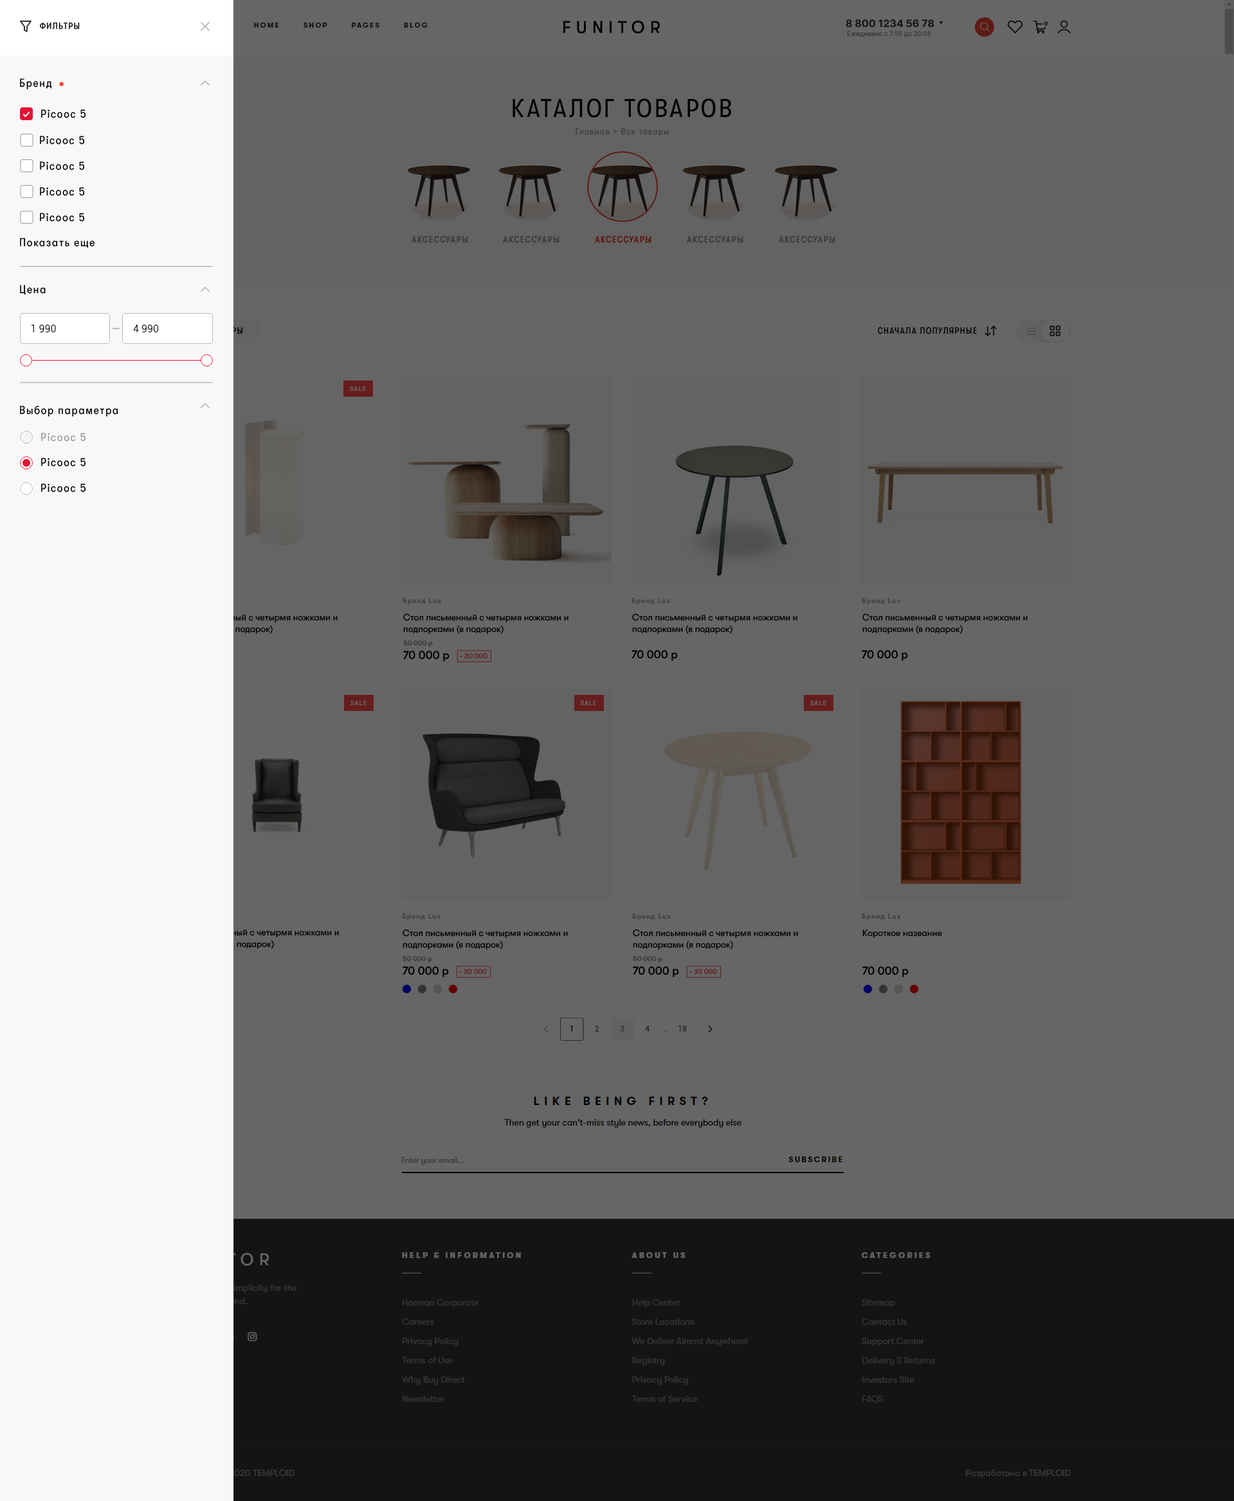
<style>
.page{position:relative;width:1234px;height:1501px;background:#666666}
.page>*{position:absolute;margin:0}
.t1{font:9px "GTWalsheimPro-CondensedRegular";letter-spacing:0.1em;color:#000000}
.t2{font:11.6px "GTWalsheimPro-CondensedRegular";letter-spacing:0.1em;color:#000000}
.t3{font:25.7px "GTWalsheimPro-CondensedRegular";letter-spacing:0.1em;color:#000000;text-transform:uppercase}
.t4{font:9px "GTWalsheimPro-CondensedRegular";letter-spacing:0.1em;color:#3c3c3c}
.t5{font:9px "GTWalsheimPro-CondensedRegular";letter-spacing:0.1em;color:#3c3c3c;text-transform:uppercase;font-weight:bold}
.t6{font:9px "GTWalsheimPro-CondensedRegular";letter-spacing:0.1em;color:#5e1b15;text-transform:uppercase;font-weight:bold}
.t7{font:9px "GTWalsheimPro-CondensedRegular";letter-spacing:0.1em;color:#000000;text-transform:uppercase}
.t8{font:11.6px "GTWalsheimPro-CondensedRegular";letter-spacing:0.1em;color:#979797}
.t9{font:7.1px "GTWalsheimPro-Medium";letter-spacing:0.1em;color:#3c3c3c}
.t10{font:9px/11.6px "GTWalsheimPro-Regular";color:#000000}
.t11{font:7.1px "GTWalsheimPro-Medium";color:#3c3c3c}
.t12{font:11.6px "GTWalsheimPro-Medium";color:#000000}
.t13{font:7.1px "GTWalsheimPro-Medium";color:#661d1d}
.t14{font:9px "GTWalsheimPro-Regular";color:#000000}
.t15{font:9px "GTWalsheimPro-Regular";color:#3c3c3c}
</style>
<div class="page">
<p class="t1" style="left:40px;top:22px;width:40px;height:8px">ФИЛЬТРЫ</p>
<p class="t2" style="left:20px;top:78px;width:32px;height:11px">Бренд</p>
<p class="t3" style="left:512px;top:98px;width:219px;height:20px">КАТАЛОГ ТОВАРОВ</p>
<p class="t2" style="left:41px;top:109px;width:45px;height:9px">Picooc 5</p>
<p class="t2" style="left:40px;top:136px;width:45px;height:9px">Picooc 5</p>
<p class="t4" style="left:575px;top:128px;width:94px;height:9px">Главная &gt; Все товары</p>
<p class="t2" style="left:40px;top:161px;width:45px;height:9px">Picooc 5</p>
<p class="t2" style="left:40px;top:187px;width:45px;height:9px">Picooc 5</p>
<p class="t2" style="left:40px;top:213px;width:45px;height:9px">Picooc 5</p>
<p class="t2" style="left:20px;top:238px;width:74px;height:10px">Показать еще</p>
<p class="t5" style="left:411px;top:235px;width:57px;height:8px">аксессуары</p>
<p class="t5" style="left:503px;top:235px;width:56px;height:8px">аксессуары</p>
<p class="t6" style="left:595px;top:235px;width:56px;height:8px">аксессуары</p>
<p class="t5" style="left:687px;top:235px;width:56px;height:8px">аксессуары</p>
<p class="t5" style="left:779px;top:235px;width:56px;height:8px">аксессуары</p>
<p class="t2" style="left:20px;top:285px;width:26px;height:10px">Цена</p>
<p class="t7" style="left:878px;top:327px;width:99px;height:7px">Сначала популярные</p>
<p class="t2" style="left:20px;top:406px;width:98px;height:11px">Выбор параметра</p>
<p class="t8" style="left:41px;top:433px;width:45px;height:9px">Picooc 5</p>
<p class="t2" style="left:41px;top:458px;width:45px;height:9px">Picooc 5</p>
<p class="t2" style="left:41px;top:483px;width:45px;height:9px">Picooc 5</p>
<p class="t9" style="left:402px;top:598px;width:39px;height:7px">Бренд Lux</p>
<p class="t9" style="left:631px;top:598px;width:39px;height:7px">Бренд Lux</p>
<p class="t9" style="left:861px;top:598px;width:39px;height:7px">Бренд Lux</p>
<p class="t10" style="left:403px;top:613px;width:165px;height:21px">Стол письменный с четырмя ножками и подпорками (в подарок)</p>
<p class="t10" style="left:632px;top:613px;width:165px;height:21px">Стол письменный с четырмя ножками и подпорками (в подарок)</p>
<p class="t10" style="left:862px;top:613px;width:165px;height:21px">Стол письменный с четырмя ножками и подпорками (в подарок)</p>
<p class="t11" style="left:403px;top:640px;width:30px;height:7px">50 000 р</p>
<p class="t12" style="left:403px;top:651px;width:46px;height:11px">70 000 р</p>
<p class="t13" style="left:460px;top:653px;width:27px;height:6px">- 30 000</p>
<p class="t12" style="left:631px;top:650px;width:47px;height:11px">70 000 р</p>
<p class="t12" style="left:861px;top:650px;width:47px;height:11px">70 000 р</p>
<p class="t9" style="left:402px;top:914px;width:38px;height:7px">Бренд Lux</p>
<p class="t9" style="left:632px;top:914px;width:38px;height:7px">Бренд Lux</p>
<p class="t9" style="left:861px;top:914px;width:39px;height:7px">Бренд Lux</p>
<p class="t10" style="left:402px;top:929px;width:166px;height:21px">Стол письменный с четырмя ножками и подпорками (в подарок)</p>
<p class="t10" style="left:633px;top:929px;width:165px;height:21px">Стол письменный с четырмя ножками и подпорками (в подарок)</p>
<p class="t14" style="left:862px;top:930px;width:80px;height:9px">Короткое название</p>
<p class="t11" style="left:402px;top:956px;width:30px;height:7px">50 000 р</p>
<p class="t11" style="left:633px;top:956px;width:29px;height:7px">50 000 р</p>
<p class="t12" style="left:402px;top:966px;width:47px;height:11px">70 000 р</p>
<p class="t13" style="left:459px;top:969px;width:28px;height:6px">- 30 000</p>
<p class="t12" style="left:633px;top:966px;width:46px;height:11px">70 000 р</p>
<p class="t13" style="left:689px;top:969px;width:28px;height:6px">- 30 000</p>
<p class="t12" style="left:862px;top:966px;width:46px;height:11px">70 000 р</p>
<p class="t15" style="left:966px;top:1469px;width:105px;height:10px">Разработано в TEMPLOID</p>
</div>
